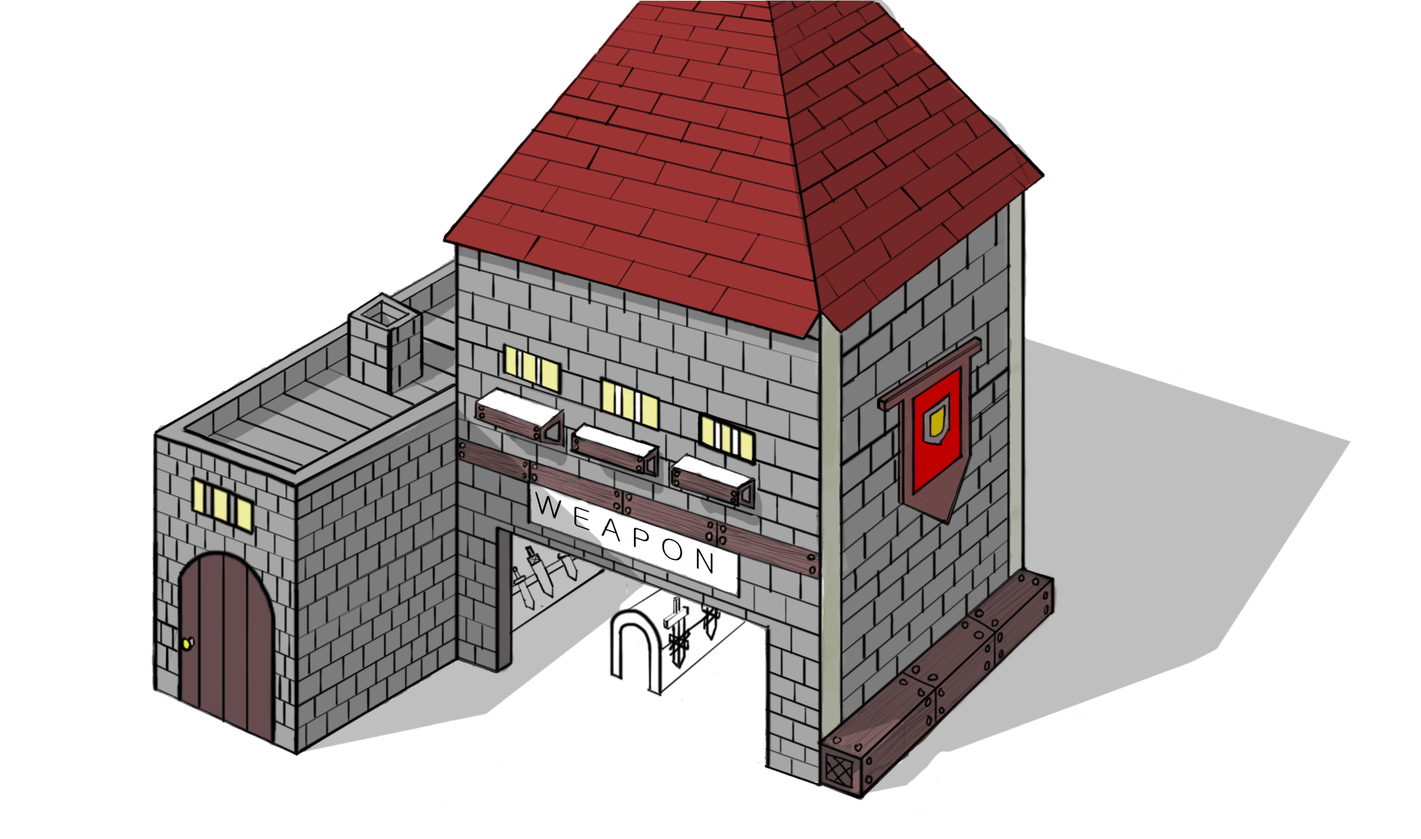
<style>
.page{position:relative;width:1421px;height:839px;background:#ffffff}
.page>*{position:absolute;margin:0}
.t1{font:27px "Gulim";color:#000000;scale:1.2 1}
</style>
<div class="page">
<p class="t1" style="left:535px;top:492px;width:178px;height:82px;rotate:19deg">W E A P O N</p>
</div>
